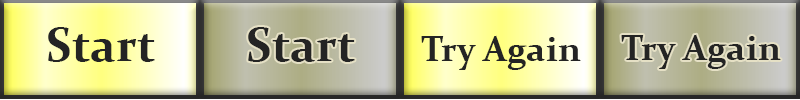
<style>
.page{position:relative;width:800px;height:100px}
.page>*{position:absolute;margin:0}
.t1{font:48px "Constantia-Bold";color:#242424}
.t2{font:36px "Constantia-Bold";color:#242424}
</style>
<div class="page">
<p class="t1" style="left:48px;top:27px;width:107px;height:35px">Start</p>
<p class="t1" style="left:248px;top:27px;width:107px;height:35px">Start</p>
<p class="t2" style="left:421px;top:35px;width:160px;height:35px">Try Again</p>
<p class="t2" style="left:621px;top:34px;width:160px;height:35px">Try Again</p>
</div>
